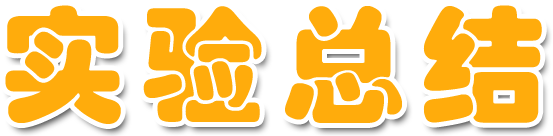
<style>
.page{position:relative;width:553px;height:136px;background:#ffac0c}
.page>*{position:absolute;margin:0}
.t1{font:125px "STHupo";letter-spacing:0.12em;color:#ffac0c}
</style>
<div class="page">
<p class="t1" style="left:5px;top:5px;width:537px;height:119px">实验总结</p>
</div>
